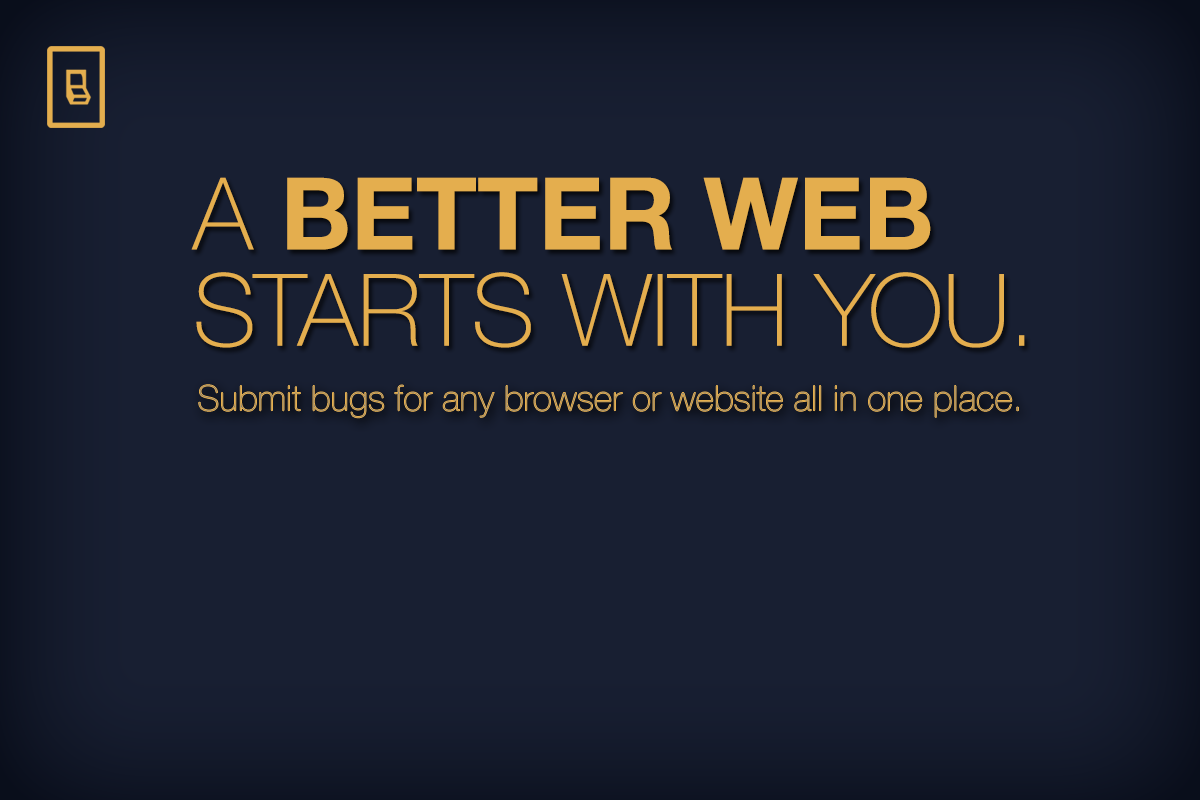
<style>
.page{position:relative;width:1200px;height:800px;background:#181f32}
.page>*{position:absolute;margin:0}
.t1{font:100.3px/96.2px "HelveticaNeue-Thin";color:#e4ae4e;text-transform:uppercase}
.t2{font:100.3px/96.2px "HelveticaNeue-Bold";color:#e4ae4e;text-transform:uppercase}
.t3{font:35.4px "HelveticaNeue-Thin";color:#b09565}
</style>
<div class="page">
<p class="t1" style="left:191px;top:177px;width:834px;height:171px">A <span class="t2">better web</span> <br>starts with you.</p>
<p class="t3" style="left:198px;top:384px;width:821px;height:34px">Submit bugs for any browser or website all in one place.</p>
</div>
